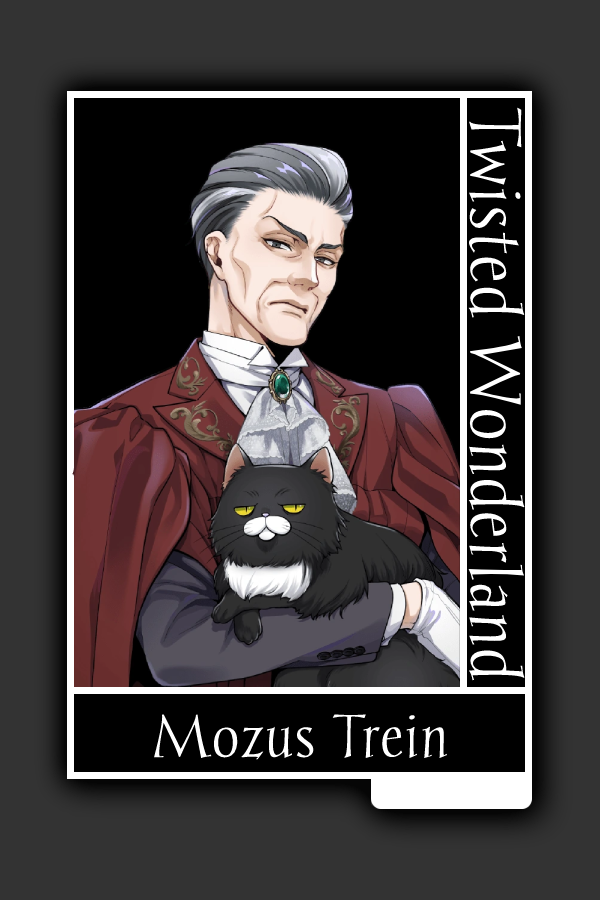
<style>
.page{position:relative;width:600px;height:900px;background:#000000}
.page>*{position:absolute;margin:0}
.t1{font:60px "Chantelli-Antiqua";color:#ffffff}
.t2{font:50px "Chantelli-Antiqua";color:#ffffff}
</style>
<div class="page">
<p class="t1" style="left:468px;top:107px;width:57px;height:574px;rotate:90deg">Twisted Wonderland</p>
<p class="t2" style="left:154px;top:714px;width:293px;height:46px">Mozus Trein</p>
</div>
